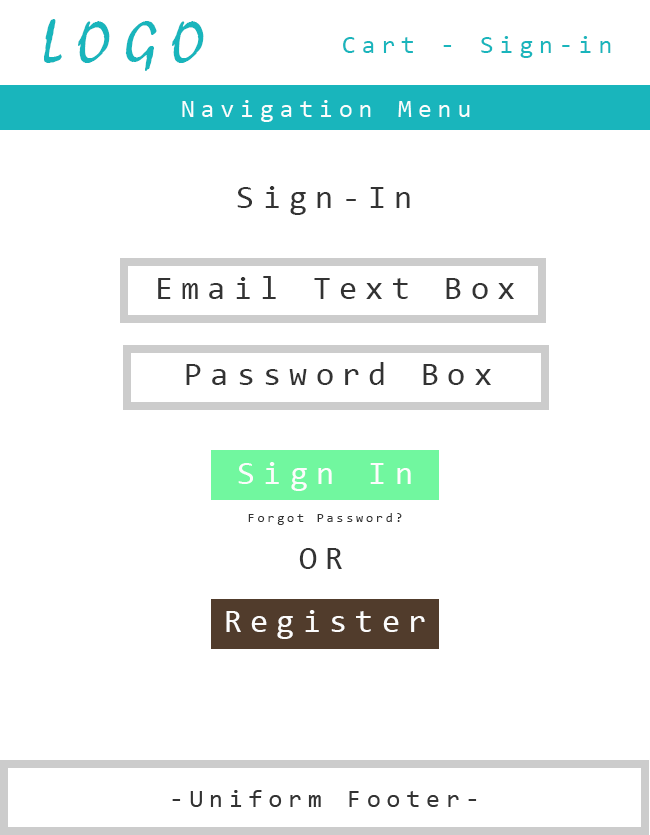
<style>
.page{position:relative;width:650px;height:835px;background:#ffffff}
.page>*{position:absolute;margin:0}
.t1{font:62.5px "Mistral";letter-spacing:0.24em;color:#19b5bc}
.t2{font:25px "Consolas";letter-spacing:0.24em;color:#19b5bc}
.t3{font:33.3px "Consolas";letter-spacing:0.24em;color:#333333}
.t4{font:33.3px "Consolas";letter-spacing:0.24em;color:#fcfcfc}
.t5{font:12.5px "Consolas";letter-spacing:0.24em;color:#333333}
</style>
<div class="page">
<p class="t1" style="left:44px;top:19px;width:160px;height:52px">LOGO</p>
<p class="t2" style="left:343px;top:36px;width:268px;height:22px">Cart - Sign-in</p>
<p class="t3" style="left:237px;top:186px;width:173px;height:29px">Sign-In</p>
<p class="t3" style="left:158px;top:276px;width:356px;height:23px">Email Text Box</p>
<p class="t3" style="left:186px;top:362px;width:305px;height:23px">Password Box</p>
<p class="t4" style="left:238px;top:462px;width:173px;height:29px">Sign In</p>
<p class="t5" style="left:248px;top:513px;width:154px;height:12px">Forgot Password?</p>
<p class="t3" style="left:299px;top:548px;width:43px;height:21px">OR</p>
<p class="t4" style="left:226px;top:610px;width:199px;height:29px">Register</p>
</div>
